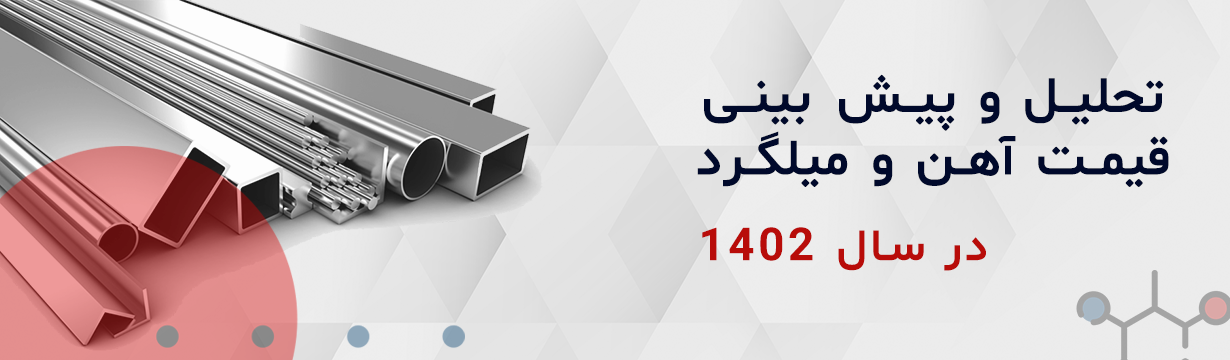
<style>
.page{position:relative;width:1230px;height:360px}
.page>*{position:absolute;margin:0}
.t1{font:51.9px "Shabnam-Bold";letter-spacing:0.08em;color:#00092b}
.t2{font:45.7px "Shabnam-Bold";letter-spacing:0.08em;color:#b80c09}
</style>
<div class="page">
<p class="t1" style="left:697px;top:74px;width:472px;height:113px;text-align:center">تحلیل و پیش ‌بینی<br>قیمت آهن و میلگرد</p>
<p class="t2" style="left:702px;top:227px;width:284px;height:44px">در سال 1402</p>
</div>
